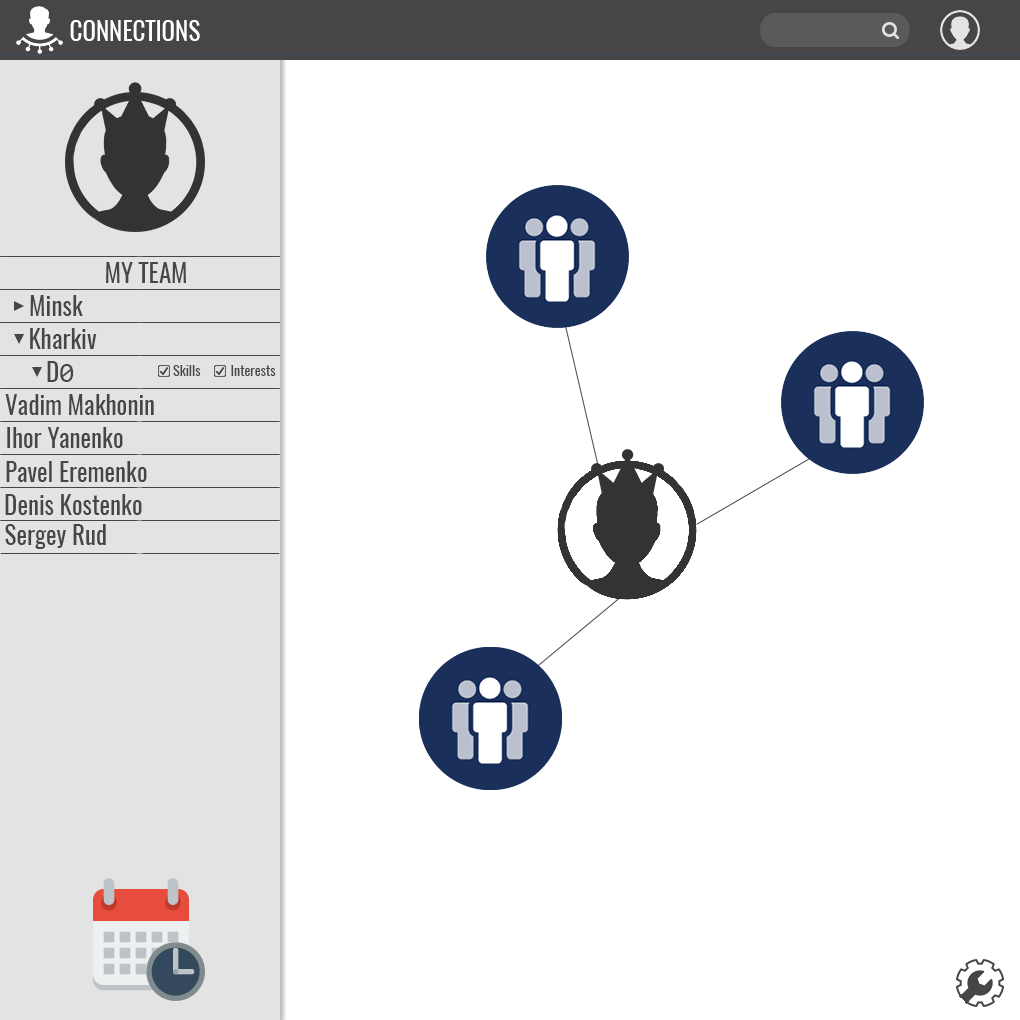
<style>
.page{position:relative;width:1020px;height:1020px;background:#ffffff}
.page>*{position:absolute;margin:0}
.t1{font:25px "Oswald-Regular";color:#ffffff}
.t2{font:25px "Oswald-Regular";color:#464547}
.t3{font:28px "Consolas";color:#464547}
.t4{font:14px "Oswald-Regular";color:#464547}
</style>
<div class="page">
<p class="t1" style="left:70px;top:20px;width:130px;height:21px">CONNECTIONS</p>
<p class="t2" style="left:106px;top:262px;width:80px;height:21px">MY TEAM</p>
<p class="t2" style="left:30px;top:295px;width:53px;height:21px">Minsk</p>
<p class="t2" style="left:30px;top:328px;width:67px;height:21px">Kharkiv</p>
<p class="t2" style="left:47px;top:361px;width:27px;height:21px">D<span class="t3">0</span></p>
<p class="t4" style="left:173px;top:365px;width:28px;height:11px">Skills</p>
<p class="t4" style="left:231px;top:365px;width:45px;height:11px">Interests</p>
<p class="t2" style="left:5px;top:394px;width:149px;height:21px">Vadim Makhonin</p>
<p class="t2" style="left:7px;top:427px;width:116px;height:21px">Ihor Yanenko</p>
<p class="t2" style="left:6px;top:461px;width:141px;height:21px">Pavel Eremenko</p>
<p class="t2" style="left:5px;top:494px;width:137px;height:21px">Denis Kostenko</p>
<p class="t2" style="left:5px;top:524px;width:101px;height:25px">Sergey Rud</p>
</div>
